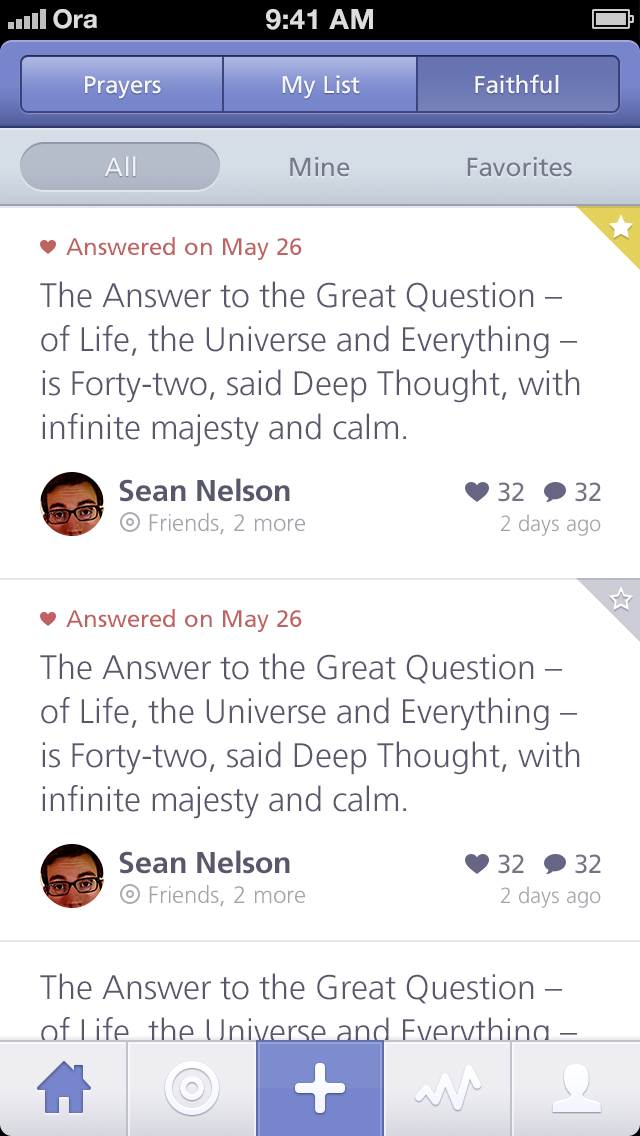
<style>
.page{position:relative;width:640px;height:1136px;background:#ffffff}
.page>*{position:absolute;margin:0}
.t1{font:24px "FrutigerLT-Roman";color:#f2f5ff}
.t2{font:26px "FrutigerLT-Roman";color:#ffffff}
.t3{font:26px "FrutigerLT-Roman";color:#747a8c}
.t4{font:26px "FrutigerLT-Roman";color:#74798b}
.t5{font:24px "FrutigerCE-Roman";color:#bf6262}
.t6{font:34px/44px "FrutigerLT-Light";color:#58586d}
.t7{font:30px "FrutigerLT-Bold";color:#58586d}
.t8{font:26px "FrutigerLT-Roman";color:#737384}
.t9{font:24px "FrutigerCE-Light";color:#a3a3ac}
.t10{font:22px "FrutigerLT-Light";color:#a3a3ac}
</style>
<div class="page">
<p class="t1" style="left:85px;top:76px;width:76px;height:23px">Prayers</p>
<p class="t1" style="left:282px;top:75px;width:78px;height:24px">My List</p>
<p class="t1" style="left:475px;top:74px;width:84px;height:20px">Faithful</p>
<p class="t2" style="left:104px;top:156px;width:32px;height:20px">All</p>
<p class="t3" style="left:290px;top:157px;width:60px;height:20px">Mine</p>
<p class="t4" style="left:467px;top:157px;width:105px;height:20px">Favorites</p>
<p class="t5" style="left:66px;top:237px;width:236px;height:23px">Answered on May 26</p>
<p class="t6" style="left:40px;top:281px;width:540px;height:166px">The Answer to the Great Question – of Life, the Universe and Everything – is Forty-two, said Deep Thought, with infinite majesty and calm.</p>
<p class="t7" style="left:119px;top:478px;width:171px;height:24px">Sean Nelson</p>
<p class="t8" style="left:498px;top:482px;width:26px;height:20px">32</p>
<p class="t8" style="left:575px;top:482px;width:26px;height:20px">32</p>
<p class="t9" style="left:149px;top:513px;width:156px;height:22px">Friends, 2 more</p>
<p class="t10" style="left:501px;top:514px;width:100px;height:22px">2 days ago</p>
<p class="t5" style="left:66px;top:609px;width:236px;height:23px">Answered on May 26</p>
<p class="t6" style="left:40px;top:653px;width:540px;height:166px">The Answer to the Great Question – of Life, the Universe and Everything – is Forty-two, said Deep Thought, with infinite majesty and calm.</p>
<p class="t7" style="left:119px;top:850px;width:171px;height:24px">Sean Nelson</p>
<p class="t8" style="left:498px;top:854px;width:26px;height:20px">32</p>
<p class="t8" style="left:575px;top:854px;width:26px;height:20px">32</p>
<p class="t9" style="left:149px;top:885px;width:156px;height:22px">Friends, 2 more</p>
<p class="t10" style="left:501px;top:886px;width:100px;height:22px">2 days ago</p>
</div>
